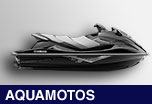
<style>
.page{position:relative;width:152px;height:104px}
.page>*{position:absolute;margin:0}
.t1{font:14px "Helvetica-Bold";color:#ffffff}
</style>
<div class="page">
<p class="t1" style="left:5px;top:89px;width:90px;height:12px">AQUAMOTOS</p>
</div>
